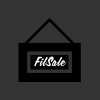
<style>
.page{position:relative;width:100px;height:100px;background:#333333}
.page>*{position:absolute;margin:0}
.t1{font:12px "CalgaryScriptOT";letter-spacing:0.05em;color:#ffffff}
</style>
<div class="page">
<p class="t1" style="left:34px;top:56px;width:33px;height:11px">FilSale</p>
</div>
